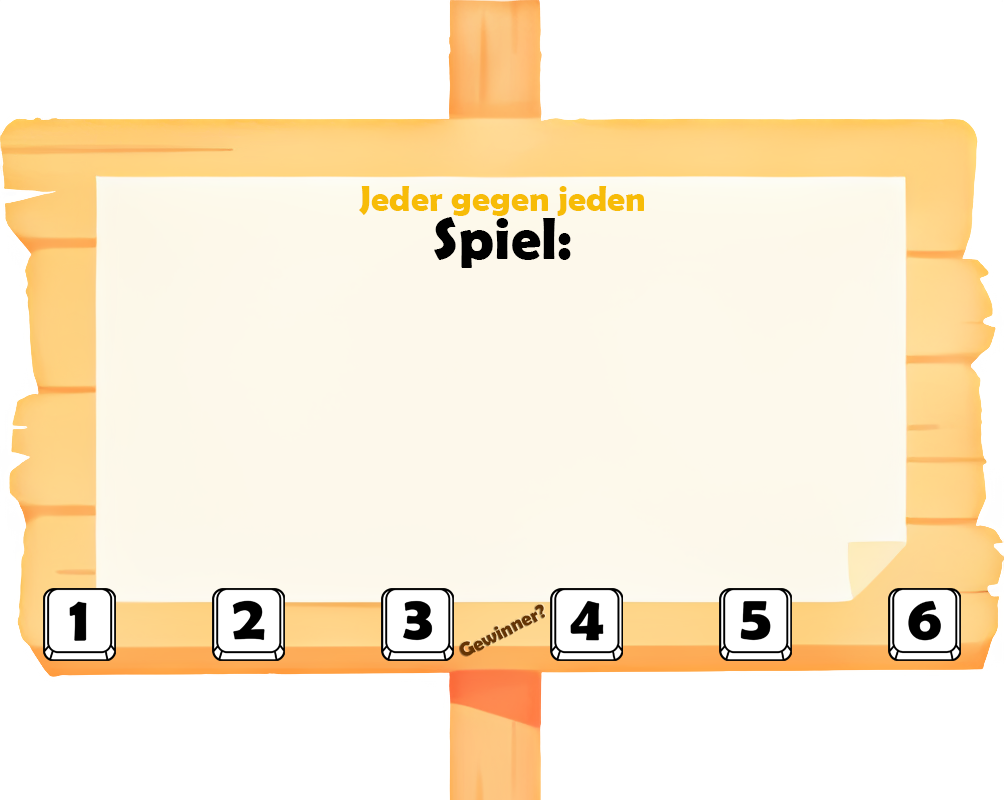
<style>
.page{position:relative;width:1004px;height:800px;background:#ffffff}
.page>*{position:absolute;margin:0}
.t1{font:36px/48px "BerlinSansFBDemi-Bold";color:#f7bc07}
.t2{font:60px/48px "BerlinSansFBDemi-Bold";color:#000000}
.t3{font:20.2px "BerlinSansFBDemi-Bold";color:#643404}
</style>
<div class="page">
<p class="t1" style="left:359px;top:186px;width:285px;height:82px;text-align:center">Jeder gegen jeden<br><span class="t2">Spiel:</span></p>
<p class="t3" style="left:460px;top:604px;width:85px;height:52px;rotate:-27deg">Gewinner?</p>
</div>
